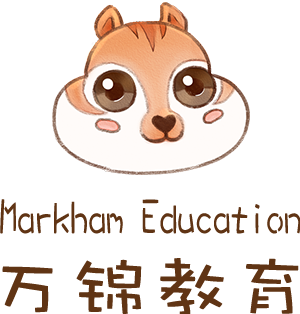
<style>
.page{position:relative;width:300px;height:314px;background:#ffffff}
.page>*{position:absolute;margin:0}
.t1{font:47.6px "DFWaWaW5";color:#603414;scale:0.73 1}
.t2{font:71.1px "DFWaWaW5";color:#603414;scale:1.14 1}
</style>
<div class="page">
<p class="t1" style="left:0px;top:199px;width:301px;height:35px">Markham Education</p>
<p class="t2" style="left:2px;top:258px;width:297px;height:58px">万锦教育</p>
</div>
